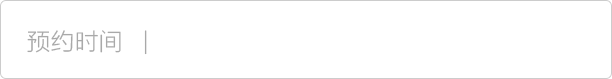
<style>
.page{position:relative;width:612px;height:79px;background:#ffffff}
.page>*{position:absolute;margin:0}
.t1{font:24px "FZLTXHK";color:#a9a9a9}
</style>
<div class="page">
<p class="t1" style="left:27px;top:30px;width:120px;height:25px">预约时间   |</p>
</div>
